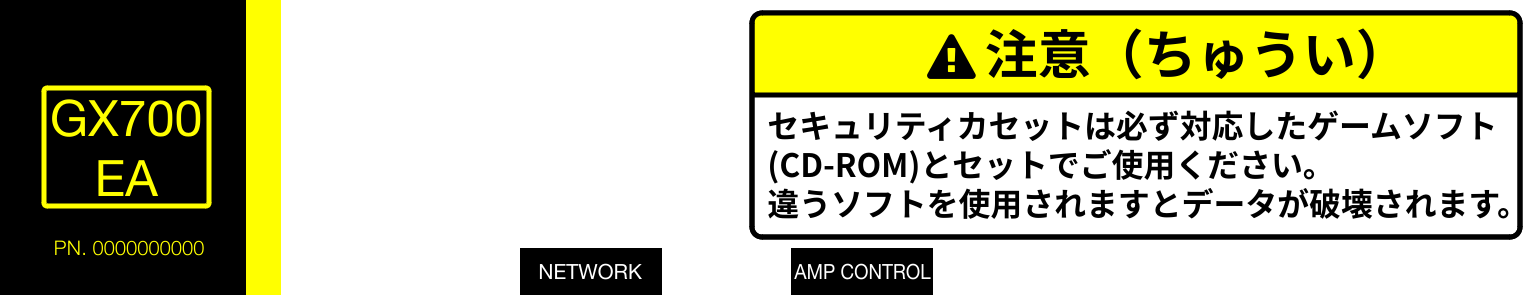
<style>
.page{position:relative;width:1535px;height:295px;background:#ffffff}
.page>*{position:absolute;margin:0}
.t1{font:53px "NotoSansJP-Bold";color:#000000}
.t2{font:50.2px "HelveticaNeue";color:#ffff00}
.t3{font:32.3px "NotoSansJP-Bold";color:#000000}
.t4{font:20.1px "HelveticaNeue-Light";color:#ffff00}
.t5{font:20.9px "HelveticaNeue";color:#ffffff}
.t6{font:20.9px "HelveticaNeue";color:#ffffff;scale:0.9 1}
</style>
<div class="page">
<p class="t1" style="left:986px;top:28px;width:388px;height:52px">注意（ちゅうい）</p>
<p class="t2" style="left:52px;top:99px;width:149px;height:97px;text-align:center">GX700<br>EA</p>
<p class="t3" style="left:768px;top:110px;width:741px;height:109px">セキュリティカセットは必ず対応したゲームソフト<br>(CD-ROM)とセットでご使用ください。<br>違うソフトを使用されますとデータが破壊されます。</p>
<p class="t4" style="left:55px;top:240px;width:149px;height:16px">PN. 0000000000</p>
<p class="t5" style="left:539px;top:263px;width:103px;height:17px">NETWORK</p>
<p class="t6" style="left:794px;top:263px;width:137px;height:17px">AMP CONTROL</p>
</div>
